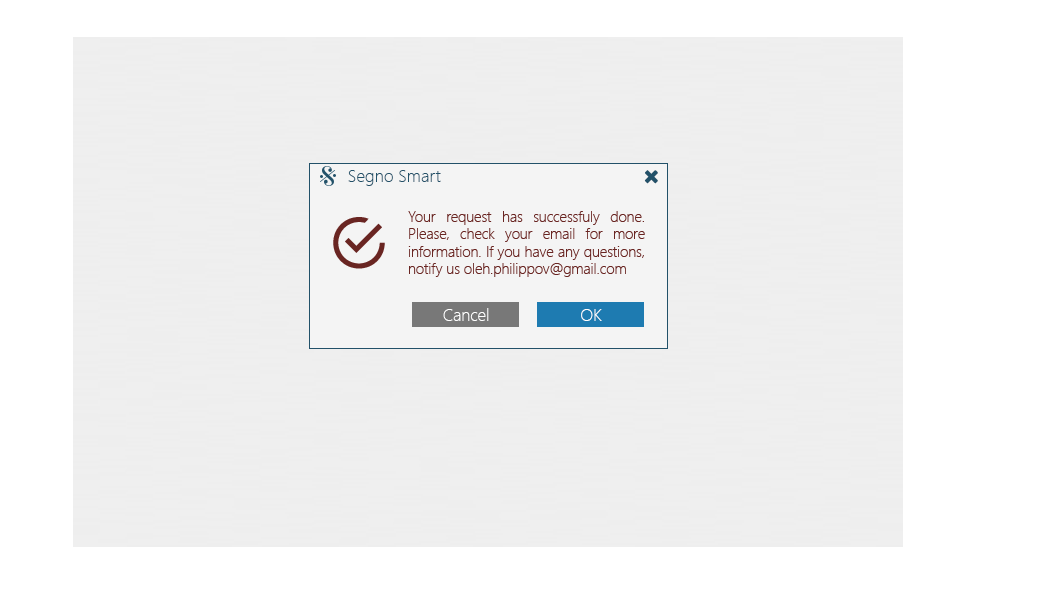
<style>
.page{position:relative;width:1050px;height:600px;background:#efefef}
.page>*{position:absolute;margin:0}
.t1{font:17.2px "SegoeUI-Light";color:#225169}
.t2{font:14.6px "SegoeUI-Light";color:#692522}
.t3{font:16.7px "SegoeUI-Light";color:#ffffff}
</style>
<div class="page">
<p class="t1" style="left:348px;top:170px;width:93px;height:16px">Segno Smart</p>
<p class="t2" style="left:408px;top:211px;width:237px;height:66px;text-align:justify">Your request has successfuly done. Please, check your email for more information. If you have any questions, notify us oleh.philippov@gmail.com</p>
<p class="t3" style="left:443px;top:308px;width:46px;height:13px">Cancel</p>
<p class="t3" style="left:581px;top:309px;width:21px;height:12px">OK</p>
</div>
